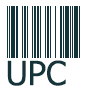
<style>
.page{position:relative;width:88px;height:88px;background:#ffffff}
.page>*{position:absolute;margin:0}
.t1{font:33.3px "Tahoma";color:#14343b}
</style>
<div class="page">
<p class="t1" style="left:7px;top:60px;width:59px;height:26px">UPC</p>
</div>
